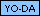
<style>
.page{position:relative;width:40px;height:16px;background:#8dc6ff}
.page>*{position:absolute;margin:0}
.t1{font:9px "Tahoma";color:#000000}
</style>
<div class="page">
<p class="t1" style="left:5px;top:5px;width:30px;height:7px">YO-DA</p>
</div>
